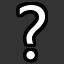
<style>
.page{position:relative;width:64px;height:64px;background:#333333}
.page>*{position:absolute;margin:0}
.t1{font:75px "Leelawadee";color:#ffffff}
</style>
<div class="page">
<p class="t1" style="left:19px;top:5px;width:26px;height:55px">?</p>
</div>
